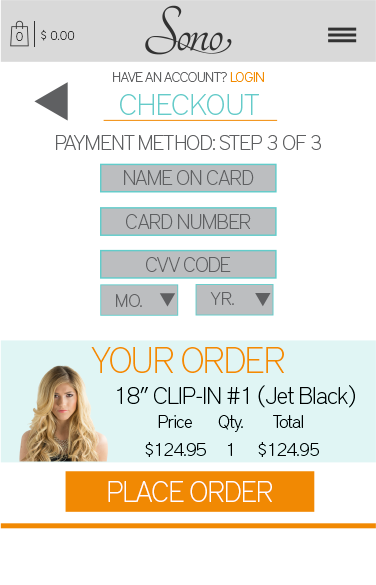
<style>
.page{position:relative;width:376px;height:585px;background:#ffffff}
.page>*{position:absolute;margin:0}
.t1{font:12.4px "DistrictPro-Thin";color:#323232}
.t2{font:14px "DistrictPro-Thin";letter-spacing:-0.031em;color:#5f6062}
.t3{font:14px "DistrictPro-Thin";letter-spacing:-0.031em;color:#f38b00}
.t4{font:30px "DistrictPro-Thin";color:#65cbc9}
.t5{font:21px "DistrictPro-Thin";letter-spacing:-0.031em;color:#5f6062}
.t6{font:20.5px "DistrictPro-Thin";letter-spacing:-0.031em;color:#5f6062}
.t7{font:18px "DistrictPro-Thin";color:#5f6062}
.t8{font:36px "DistrictPro-Thin";letter-spacing:-0.031em;color:#f38b00}
.t9{font:24px "DistrictPro-Thin";letter-spacing:-0.031em;color:#000000}
.t10{font:18px/14px "DistrictPro-Thin";letter-spacing:-0.031em;color:#000000}
.t11{font:28.8px "DistrictPro-Thin";letter-spacing:-0.031em;color:#ffffff}
</style>
<div class="page">
<p class="t1" style="left:41px;top:29px;width:34px;height:12px">$ 0.00</p>
<p class="t1" style="left:16px;top:32px;width:7px;height:9px">0</p>
<p class="t2" style="left:113px;top:72px;width:151px;height:10px">HAVE AN ACCOUNT? <span class="t3">LOGIN</span></p>
<p class="t4" style="left:120px;top:94px;width:139px;height:21px">CHECKOUT</p>
<p class="t5" style="left:56px;top:135px;width:265px;height:15px">PAYMENT METHOD: STEP 3 OF 3</p>
<p class="t6" style="left:124px;top:170px;width:130px;height:15px">NAME ON CARD</p>
<p class="t6" style="left:126px;top:214px;width:125px;height:15px">CARD NUMBER</p>
<p class="t6" style="left:146px;top:257px;width:85px;height:15px">CVV CODE</p>
<p class="t7" style="left:116px;top:294px;width:26px;height:13px">MO.</p>
<p class="t7" style="left:210px;top:292px;width:24px;height:13px">YR.</p>
<p class="t8" style="left:91px;top:347px;width:193px;height:26px">YOUR ORDER</p>
<p class="t9" style="left:117px;top:385px;width:238px;height:23px">18” CLIP-IN #1 (Jet Black)</p>
<p class="t10" style="left:145px;top:415px;width:61px;height:42px;text-align:center">Price<br><br>$124.95</p>
<p class="t10" style="left:218px;top:415px;width:25px;height:41px;text-align:center">Qty.<br><br>1</p>
<p class="t10" style="left:258px;top:415px;width:61px;height:42px;text-align:center">Total<br><br>$124.95</p>
<p class="t11" style="left:108px;top:481px;width:164px;height:21px">PLACE ORDER</p>
</div>
